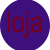
<style>
.page{position:relative;width:50px;height:50px;background:#3d107b}
.page>*{position:absolute;margin:0}
.t1{font:28.8px "ArialMT";color:#6e0023;scale:0.83 1}
</style>
<div class="page">
<p class="t1" style="left:7px;top:11px;width:36px;height:28px">loja</p>
</div>
